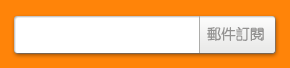
<style>
.page{position:relative;width:290px;height:68px;background:#ff8409}
.page>*{position:absolute;margin:0}
.t1{font:14px "FZY1K--GBK1-0";color:#939291;font-weight:bold}
</style>
<div class="page">
<p class="t1" style="left:207px;top:27px;width:57px;height:14px">郵件訂閱</p>
</div>
